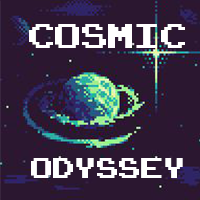
<style>
.page{position:relative;width:200px;height:200px;background:#2b1730}
.page>*{position:absolute;margin:0}
.t1{font:48px "ArcadeClassic";color:#ffffff}
.t2{font:40.1px "ArcadeClassic";color:#ffffff}
</style>
<div class="page">
<p class="t1" style="left:29px;top:24px;width:156px;height:24px">cosmicc</p>
<p class="t2" style="left:31px;top:158px;width:152px;height:20px">odyssey</p>
</div>
